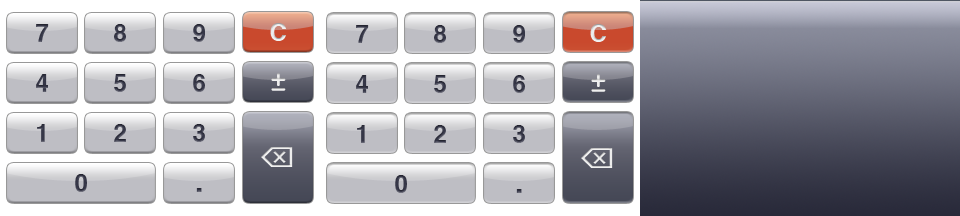
<style>
.page{position:relative;width:960px;height:216px}
.page>*{position:absolute;margin:0}
.t1{font:24px "Helvetica-Bold";color:#363748}
.t2{font:24px "Helvetica-Bold";color:#eeeeee}
.t3{font:28px "OCRAStd";color:#eeeeee}
.t4{font:28px "LucidaGrande-Bold";color:#eeeeee}
.t5{font:30px "Helvetica-Bold";color:#363748}
</style>
<div class="page">
<p class="t1" style="left:36px;top:24px;width:13px;height:18px">7</p>
<p class="t1" style="left:114px;top:24px;width:12px;height:18px">8</p>
<p class="t1" style="left:193px;top:24px;width:12px;height:18px">9</p>
<p class="t2" style="left:270px;top:23px;width:16px;height:18px">C</p>
<p class="t1" style="left:356px;top:25px;width:13px;height:18px">7</p>
<p class="t1" style="left:434px;top:25px;width:12px;height:18px">8</p>
<p class="t1" style="left:513px;top:25px;width:12px;height:18px">9</p>
<p class="t2" style="left:590px;top:24px;width:16px;height:18px">C</p>
<p class="t1" style="left:36px;top:74px;width:12px;height:18px">4</p>
<p class="t1" style="left:114px;top:74px;width:12px;height:18px">5</p>
<p class="t1" style="left:193px;top:74px;width:12px;height:18px">6</p>
<p class="t3" style="left:271px;top:73px;width:15px;height:18px">±</p>
<p class="t1" style="left:356px;top:75px;width:12px;height:18px">4</p>
<p class="t1" style="left:434px;top:75px;width:12px;height:18px">5</p>
<p class="t1" style="left:513px;top:75px;width:12px;height:18px">6</p>
<p class="t3" style="left:591px;top:74px;width:15px;height:18px">±</p>
<p class="t1" style="left:37px;top:124px;width:8px;height:18px">1</p>
<p class="t1" style="left:114px;top:124px;width:12px;height:18px">2</p>
<p class="t1" style="left:193px;top:124px;width:12px;height:18px">3</p>
<p class="t1" style="left:357px;top:125px;width:8px;height:18px">1</p>
<p class="t1" style="left:434px;top:125px;width:12px;height:18px">2</p>
<p class="t1" style="left:513px;top:125px;width:12px;height:18px">3</p>
<p class="t4" style="left:261px;top:147px;width:32px;height:20px">⌫</p>
<p class="t4" style="left:581px;top:148px;width:32px;height:20px">⌫</p>
<p class="t1" style="left:75px;top:174px;width:12px;height:18px">0</p>
<p class="t1" style="left:395px;top:175px;width:12px;height:18px">0</p>
<p class="t5" style="left:196px;top:188px;width:6px;height:4px">.</p>
<p class="t5" style="left:516px;top:189px;width:6px;height:4px">.</p>
</div>
